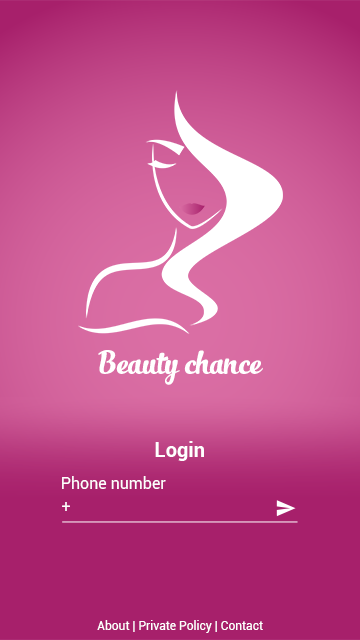
<style>
.page{position:relative;width:360px;height:640px;background:#a7206b}
.page>*{position:absolute;margin:0}
.t1{font:24px "SlimTony-Italic";color:#ffffff}
.t2{font:20px "Roboto-Bold";color:#ffffff}
.t3{font:16px "Roboto-Regular";color:#ffffff}
.t4{font:12px "Roboto-Regular";color:#ffffff}
</style>
<div class="page">
<p class="t1" style="left:98px;top:350px;width:165px;height:35px">Beauty chance</p>
<p class="t2" style="left:155px;top:441px;width:49px;height:20px">Login</p>
<p class="t3" style="left:62px;top:476px;width:104px;height:13px">Phone number</p>
<p class="t3" style="left:62px;top:502px;width:8px;height:9px">+</p>
<p class="t4" style="left:97px;top:620px;width:166px;height:13px">About | Private Policy | Contact</p>
</div>
